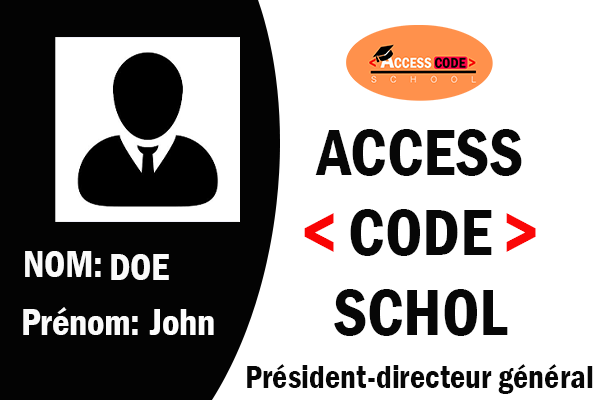
<style>
.page{position:relative;width:600px;height:400px;background:#ffffff}
.page>*{position:absolute;margin:0}
.t1{font:66.7px "FranklinGothic-DemiCond";color:#070707}
.t2{font:66.7px "FranklinGothic-DemiCond";color:#f90404}
.t3{font:66.7px "FranklinGothic-DemiCond";color:#fa0707}
.t4{font:37.5px "FranklinGothic-DemiCond";color:#fafafa}
.t5{font:37.5px "FranklinGothic-DemiCond";color:#fefefe}
.t6{font:33.3px "FranklinGothic-DemiCond";color:#070707}
</style>
<div class="page">
<p class="t1" style="left:304px;top:129px;width:232px;height:207px;text-align:center">ACCESS<br><span class="t2">&lt;</span> CODE <span class="t3">&gt;<br></span>SCHOL</p>
<p class="t4" style="left:25px;top:251px;width:76px;height:26px">NOM:</p>
<p class="t4" style="left:111px;top:254px;width:58px;height:26px">DOE</p>
<p class="t4" style="left:23px;top:307px;width:115px;height:28px">Prénom:</p>
<p class="t5" style="left:149px;top:309px;width:65px;height:26px">John</p>
<p class="t6" style="left:247px;top:364px;width:346px;height:30px">Président-directeur général</p>
</div>
